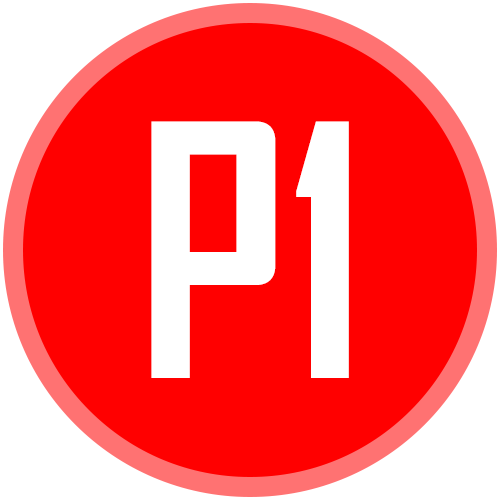
<style>
.page{position:relative;width:500px;height:500px;background:#ff0000}
.page>*{position:absolute;margin:0}
.t1{font:335.4px "AgencyFB-Bold";color:#ffffff}
</style>
<div class="page">
<p class="t1" style="left:151px;top:121px;width:198px;height:257px">P1</p>
</div>
